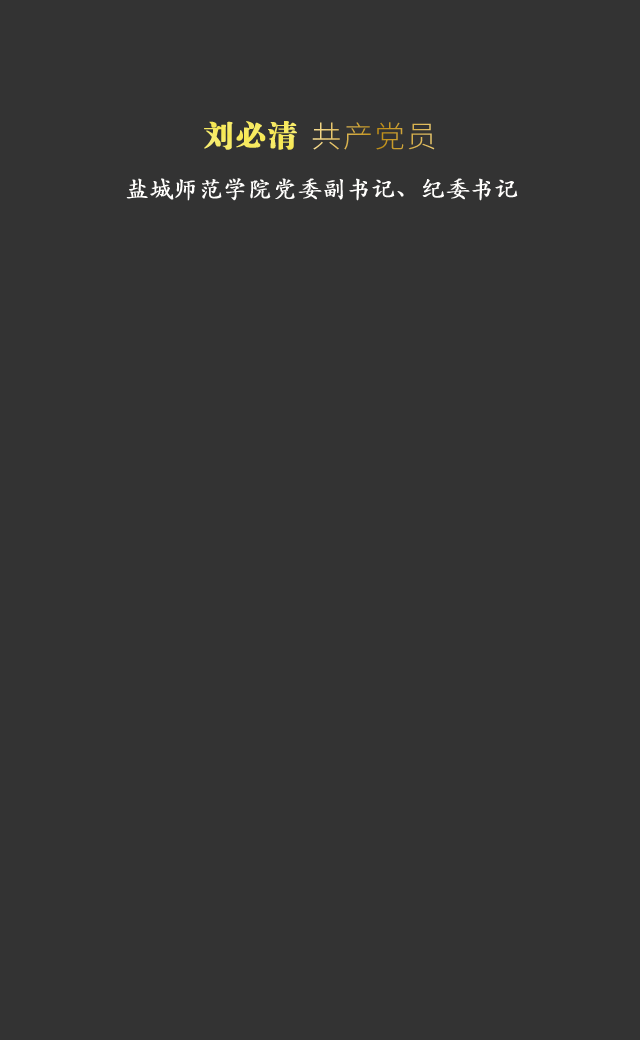
<style>
.page{position:relative;width:640px;height:1040px;background:#333333}
.page>*{position:absolute;margin:0}
.t1{font:31px "FZDBSJW--GB1-0";color:#f7ea60;text-transform:uppercase;font-weight:bold}
.t2{font:24px "STKaiti";color:#fffefc;text-transform:uppercase;font-weight:bold}
</style>
<div class="page">
<p class="t1" style="left:204px;top:121px;width:93px;height:29px">刘必清</p>
<p class="t2" style="left:126px;top:178px;width:392px;height:23px">盐城师范学院党委副书记、纪委书记</p>
</div>
